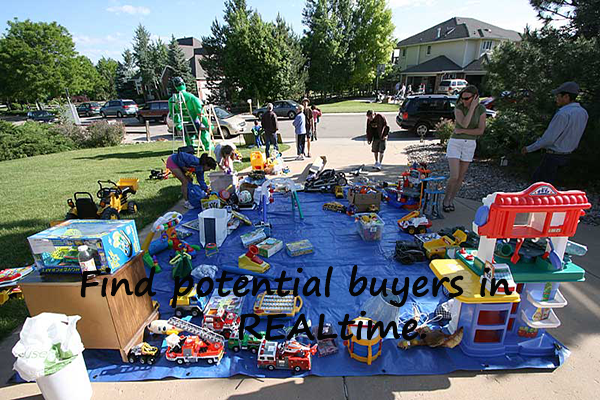
<style>
.page{position:relative;width:600px;height:400px}
.page>*{position:absolute;margin:0}
.t1{font:36px "SegoePrint-Bold";color:#060606}
</style>
<div class="page">
<p class="t1" style="left:80px;top:265px;width:433px;height:76px">Find potential buyers in <br>           REALtime.</p>
</div>
